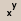
<style>
.page{position:relative;width:21px;height:21px;background:#d9cdc1}
.page>*{position:absolute;margin:0}
.t1{font:9px "Tahoma";color:#000000}
</style>
<div class="page">
<p class="t1" style="left:12px;top:3px;width:5px;height:7px">y</p>
<p class="t1" style="left:7px;top:11px;width:5px;height:5px">x</p>
</div>
